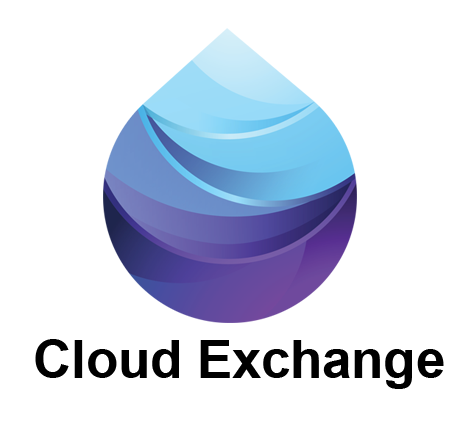
<style>
.page{position:relative;width:475px;height:438px;background:#ffffff}
.page>*{position:absolute;margin:0}
.t1{font:52.5px "Arial-BoldMT";color:#000000}
</style>
<div class="page">
<p class="t1" style="left:35px;top:339px;width:409px;height:50px">Cloud Exchange</p>
</div>
